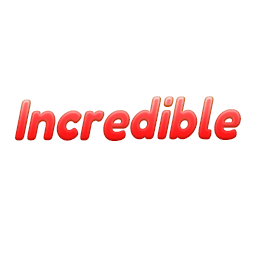
<style>
.page{position:relative;width:256px;height:256px;background:#ffffff}
.page>*{position:absolute;margin:0}
.t1{font:59.5px "Fredoka-Bold";scale:0.84 1}
</style>
<div class="page">
<p class="t1" style="left:15px;top:96px;width:226px;height:45px">Incredible</p>
</div>
